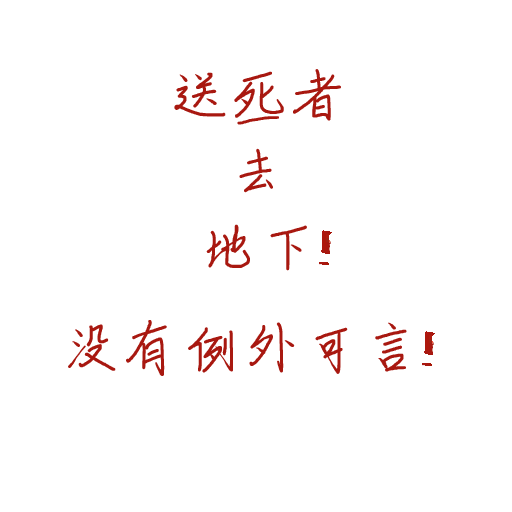
<style>
.page{position:relative;width:512px;height:512px;background:#ffffff}
.page>*{position:absolute;margin:0}
.t1{font:59.9px/75.8px "ShouShuti";color:#a81810}
.t2{font:55.2px "ShouShuti";color:#a81810}
.t3{font:59.9px "ShouShuti";color:#a81810}
</style>
<div class="page">
<p class="t1" style="left:174px;top:69px;width:167px;height:202px;text-align:center">送死者<br>去<br>地下</p>
<p class="t2" style="left:237px;top:116px;width:42px;height:9px">一</p>
<p class="t3" style="left:68px;top:320px;width:339px;height:56px">没有例外可言</p>
</div>
